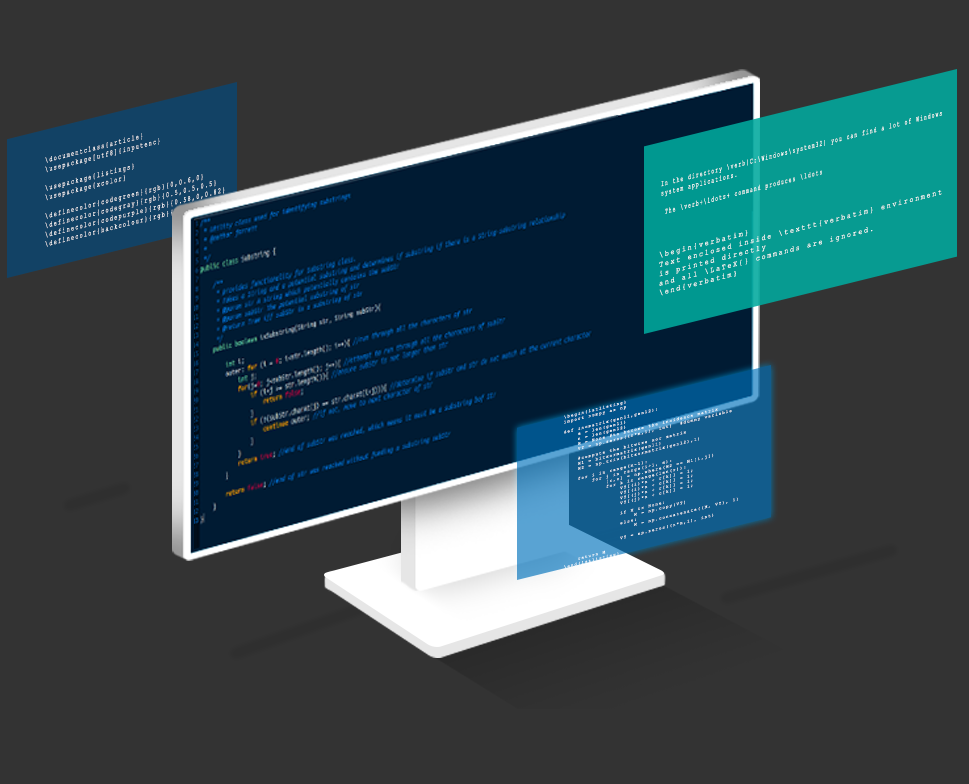
<style>
.page{position:relative;width:969px;height:784px;background:#333333}
.page>*{position:absolute;margin:0}
.t1{font:7.9px "CourierNewPSMT";letter-spacing:0.269em;color:#ffffff;scale:0.58 1}
.t2{font:7.8px "CourierNewPSMT";letter-spacing:0.269em;color:#ffffff;scale:0.66 1}
.t3{font:7.9px "CourierNewPSMT";letter-spacing:0.269em;color:#ffffff;scale:0.86 1}
.t4{font:4.2px "CourierNewPSMT";letter-spacing:0.269em;color:#ffffff}
</style>
<div class="page">
<p class="t1" style="left:661px;top:112px;width:281px;height:102px;text-align:justify;rotate:-14deg">In the directory \verb|C:\Windows\system32| you can find a lot of Windows <br>system applications. <br> <br> The \verb+\ldots+ command produces \ldots</p>
<p class="t2" style="left:45px;top:133px;width:193px;height:114px;text-align:justify;rotate:-14deg">\documentclass{article}<br>\usepackage[utf8]{inputenc}<br><br>\usepackage{listings}<br>\usepackage{xcolor}<br><br>\definecolor{codegreen}{rgb}{0,0.6,0}<br>\definecolor{codegray}{rgb}{0.5,0.5,0.5}<br>\definecolor{codepurple}{rgb}{0.58,0,0.82}<br>\definecolor{backcolour}{rgb}{0.95,0.95,0.92}</p>
<p class="t3" style="left:659px;top:190px;width:283px;height:106px;text-align:justify;rotate:-14deg">\begin{verbatim}<br>Text enclosed inside \texttt{verbatim} environment <br>is printed directly <br>and all \LaTeX{} commands are ignored.<br>\end{verbatim}</p>
<p class="t4" style="left:564px;top:400px;width:174px;height:169px;text-align:justify;rotate:-14deg">\begin{lstlisting}<br>import numpy as np<br>    <br>def incmatrix(genl1,genl2):<br>    m = len(genl1)<br>    n = len(genl2)<br>    M = None #to become the incidence matrix<br>    VT = np.zeros((n*m,1), int)  #dummy variable<br>    <br>    #compute the bitwise xor matrix<br>    M1 = bitxormatrix(genl1)<br>    M2 = np.triu(bitxormatrix(genl2),1) <br><br>    for i in range(m-1):<br>        for j in range(i+1, m):<br>            [r,c] = np.where(M2 == M1[i,j])<br>            for k in range(len(r)):<br>                VT[(i)*n + r[k]] = 1;<br>                VT[(i)*n + c[k]] = 1;<br>                VT[(j)*n + r[k]] = 1;<br>                VT[(j)*n + c[k]] = 1;<br>                <br>                if M is None:<br>                    M = np.copy(VT)<br>                else:<br>                    M = np.concatenate((M, VT), 1)<br>                <br>                VT = np.zeros((n*m,1), int)<br>    <br>    return M<br>\end{lstlisting}</p>
</div>
